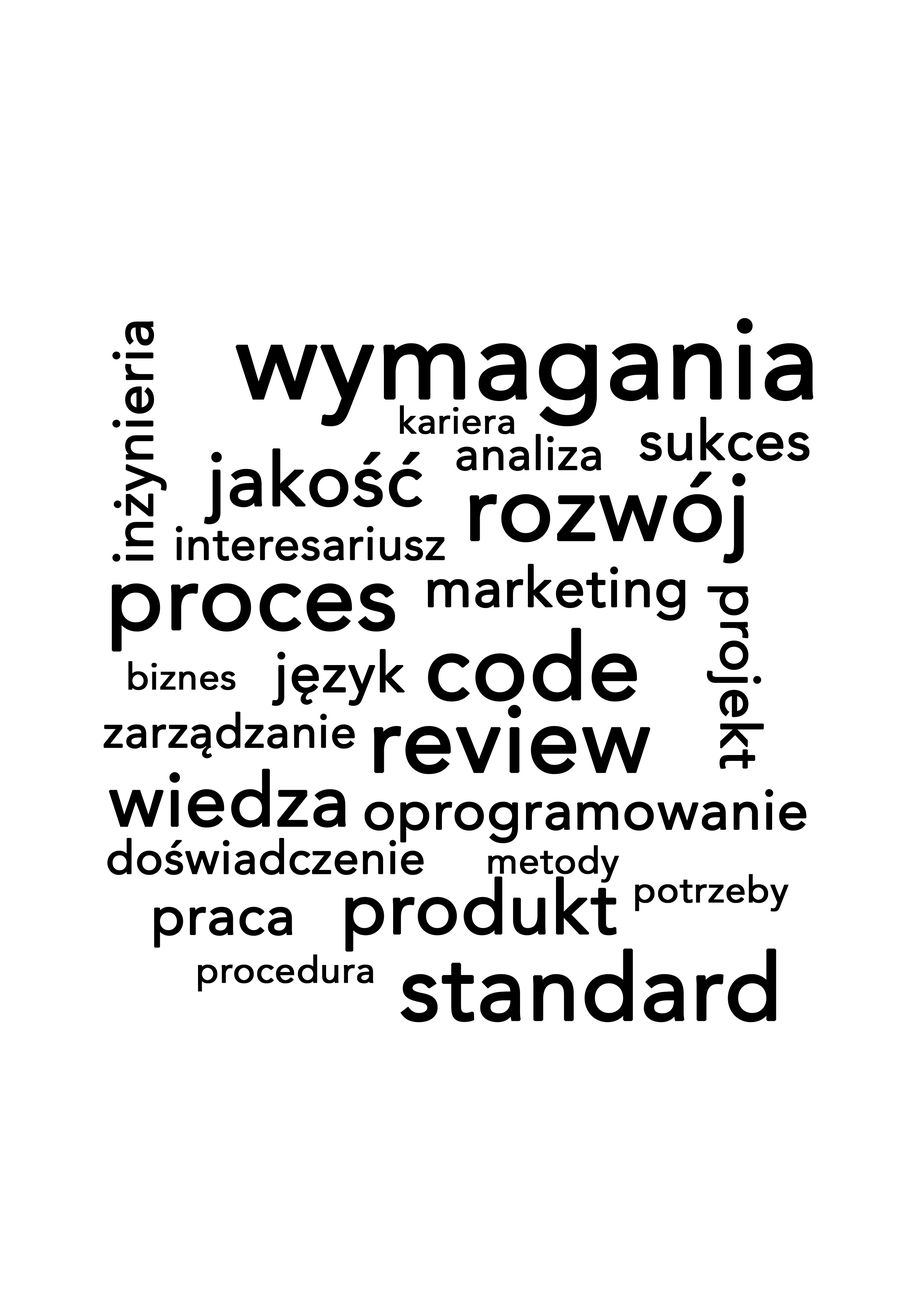
<style>
.page{position:relative;width:918px;height:1299px;background:#ffffff}
.page>*{position:absolute;margin:0}
.t1{font:111.1px "Avenir-Roman";color:#000000;font-weight:bold}
.t2{font:55.6px "Avenir-Roman";color:#000000;font-weight:bold}
.t3{font:37px "Avenir-Roman";color:#000000;font-weight:bold}
.t4{font:55.5px "Avenir-Roman";color:#000000;font-weight:bold}
.t5{font:46.3px "Avenir-Roman";color:#000000;font-weight:bold}
.t6{font:74px "Avenir-Roman";color:#000000;font-weight:bold}
.t7{font:92.6px "Avenir-Roman";color:#000000;font-weight:bold}
</style>
<div class="page">
<p class="t1" style="left:235px;top:318px;width:579px;height:108px">wymagania</p>
<p class="t2" style="left:112px;top:321px;width:55px;height:241px;rotate:-90deg">inżynieria</p>
<p class="t3" style="left:400px;top:405px;width:115px;height:29px">kariera</p>
<p class="t4" style="left:639px;top:416px;width:171px;height:45px">sukces</p>
<p class="t5" style="left:456px;top:434px;width:145px;height:37px">analiza</p>
<p class="t6" style="left:204px;top:448px;width:218px;height:76px">jakość</p>
<p class="t7" style="left:470px;top:471px;width:276px;height:92px">rozwój</p>
<p class="t5" style="left:176px;top:526px;width:269px;height:35px">interesariusz</p>
<p class="t4" style="left:428px;top:563px;width:258px;height:58px">marketing</p>
<p class="t7" style="left:112px;top:583px;width:283px;height:69px">proces</p>
<p class="t2" style="left:707px;top:586px;width:57px;height:183px;rotate:90deg">projekt</p>
<p class="t7" style="left:428px;top:628px;width:209px;height:74px">code</p>
<p class="t4" style="left:272px;top:649px;width:133px;height:57px">język</p>
<p class="t3" style="left:128px;top:661px;width:107px;height:29px">biznes</p>
<p class="t5" style="left:104px;top:711px;width:251px;height:47px">zarządzanie</p>
<p class="t7" style="left:374px;top:705px;width:276px;height:69px">review</p>
<p class="t6" style="left:109px;top:769px;width:237px;height:58px">wiedza</p>
<p class="t4" style="left:365px;top:789px;width:442px;height:54px">oprogramowanie</p>
<p class="t5" style="left:107px;top:837px;width:317px;height:38px">doświadczenie</p>
<p class="t3" style="left:488px;top:845px;width:131px;height:38px">metody</p>
<p class="t6" style="left:345px;top:876px;width:272px;height:75px">produkt</p>
<p class="t3" style="left:635px;top:874px;width:154px;height:37px">potrzeby</p>
<p class="t4" style="left:154px;top:906px;width:138px;height:42px">praca</p>
<p class="t7" style="left:400px;top:948px;width:376px;height:74px">standard</p>
<p class="t3" style="left:198px;top:954px;width:176px;height:37px">procedura</p>
</div>
